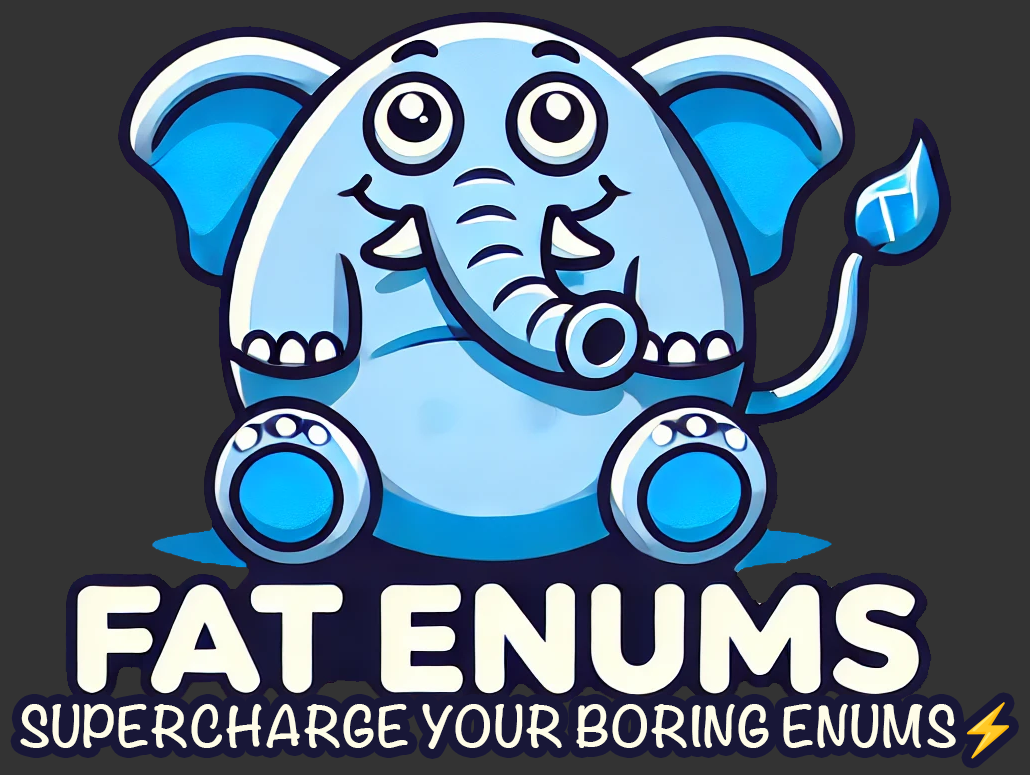
<style>
.page{position:relative;width:1030px;height:775px;background:#333333}
.page>*{position:absolute;margin:0}
.t1{font:50px "Noteworthy-Bold";color:#fefce8}
.t2{font:50px "NotoColorEmoji-SVG";color:#fefce8}
</style>
<div class="page">
<p class="t1" style="left:20px;top:702px;width:989px;height:57px">SUPERCHARGE YOUR BORING ENUMS<span class="t2">⚡️</span></p>
</div>
